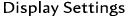
<style>
.page{position:relative;width:128px;height:16px;background:#ffffff}
.page>*{position:absolute;margin:0}
.t1{font:15.6px "Amira-Roman";letter-spacing:0.025em;color:#000000;scale:1.11 1}
</style>
<div class="page">
<p class="t1" style="left:4px;top:1px;width:121px;height:16px">Display Settings</p>
</div>
